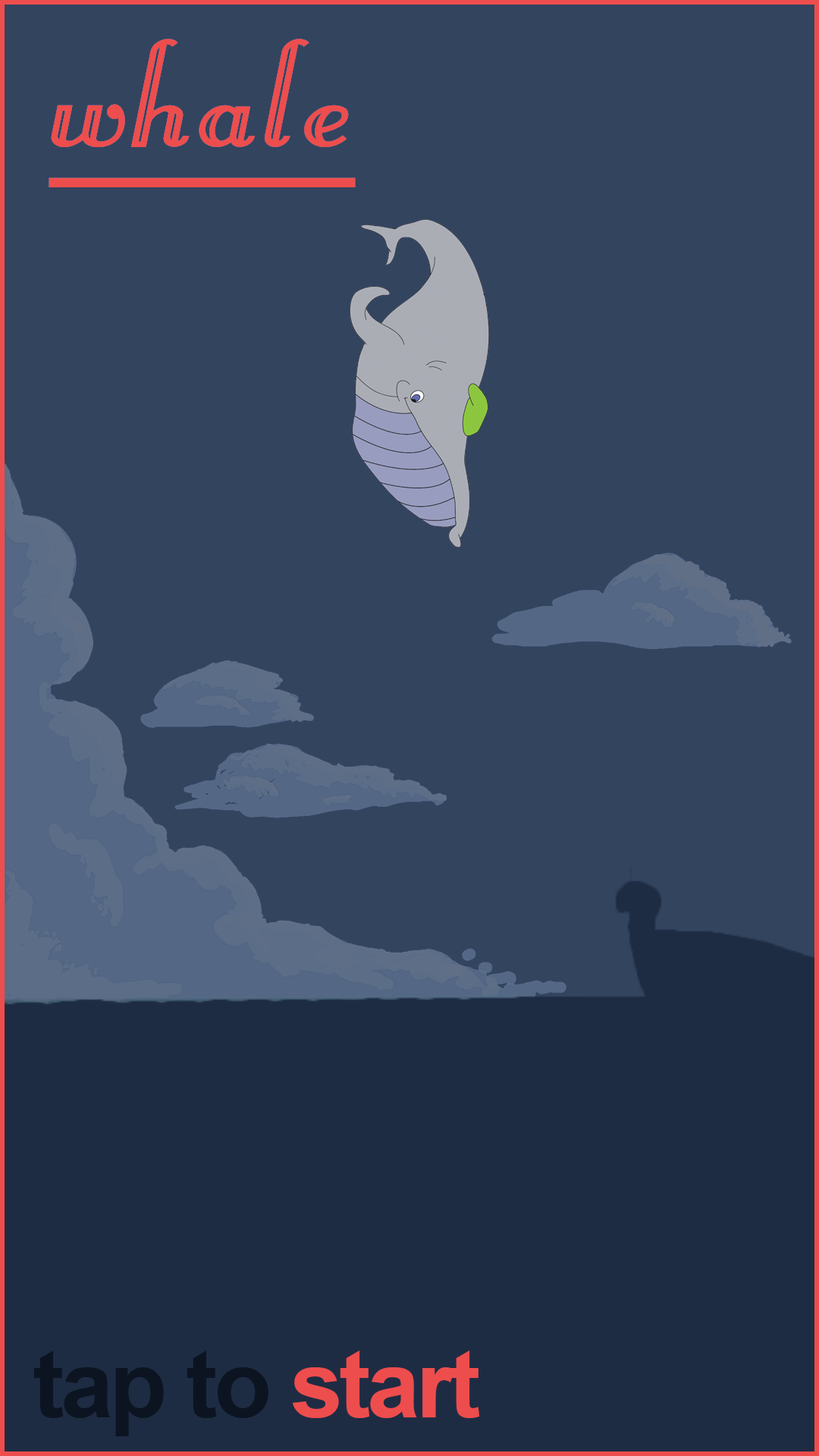
<style>
.page{position:relative;width:819px;height:1456px;background:#33445f}
.page>*{position:absolute;margin:0}
.t1{font:185.6px "LittleLordFontleroy";letter-spacing:0.04em;color:#ee4d4d;font-style:italic;text-decoration:underline;scale:1.15 1}
.t2{font:185.6px "LittleLordFontleroy";letter-spacing:0.04em;color:#ee4d4d;scale:1.15 1}
.t3{font:94.8px "Arial-BoldMT";letter-spacing:-0.04em;color:#0c1422}
.t4{font:94.8px "Arial-BoldMT";letter-spacing:-0.04em;color:#ee4d4d}
</style>
<div class="page">
<p class="t1" style="left:49px;top:39px;width:307px;height:148px"><span class="t2"><br> </span>whale</p>
<p class="t3" style="left:33px;top:1351px;width:447px;height:85px">tap to <span class="t4">start</span></p>
</div>
